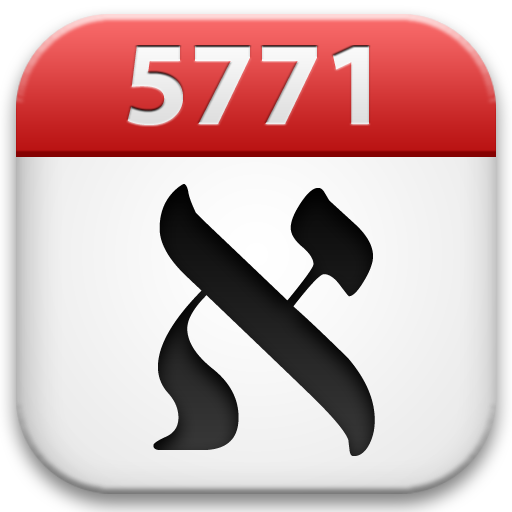
<style>
.page{position:relative;width:512px;height:512px}
.page>*{position:absolute;margin:0}
.t1{font:120px "MyriadPro-Bold";color:#ffffff}
.t2{font:570px "Yehudit";color:#181818}
</style>
<div class="page">
<p class="t1" style="left:127px;top:46px;width:242px;height:79px">5771</p>
<p class="t2" style="left:153px;top:184px;width:222px;height:272px">a</p>
</div>
